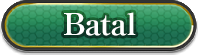
<style>
.page{position:relative;width:198px;height:55px}
.page>*{position:absolute;margin:0}
.t1{font:30px "RyuminPro-ExBold";letter-spacing:-0.04em;color:#ffffff}
</style>
<div class="page">
<p class="t1" style="left:64px;top:12px;width:72px;height:24px">Batal</p>
</div>
